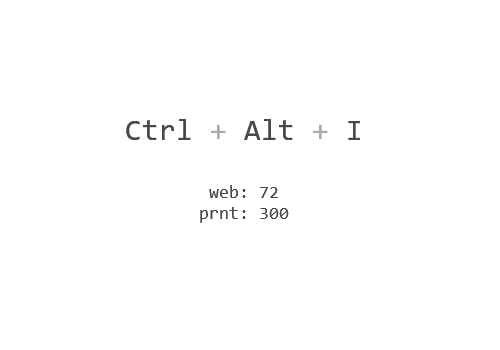
<style>
.page{position:relative;width:500px;height:350px;background:#ffffff}
.page>*{position:absolute;margin:0}
.t1{font:18px "Consolas";color:#494949}
.t2{font:30px "Consolas";color:#494949}
.t3{font:30px "Consolas";color:#a9a9a9}
</style>
<div class="page">
<p class="t1" style="left:126px;top:119px;width:234px;height:104px;text-align:center"><span class="t2">Ctrl </span><span class="t3">+</span><span class="t2"> Alt </span><span class="t3">+</span><span class="t2"> I<br><br></span>web: 72<br>prnt: 300</p>
</div>
